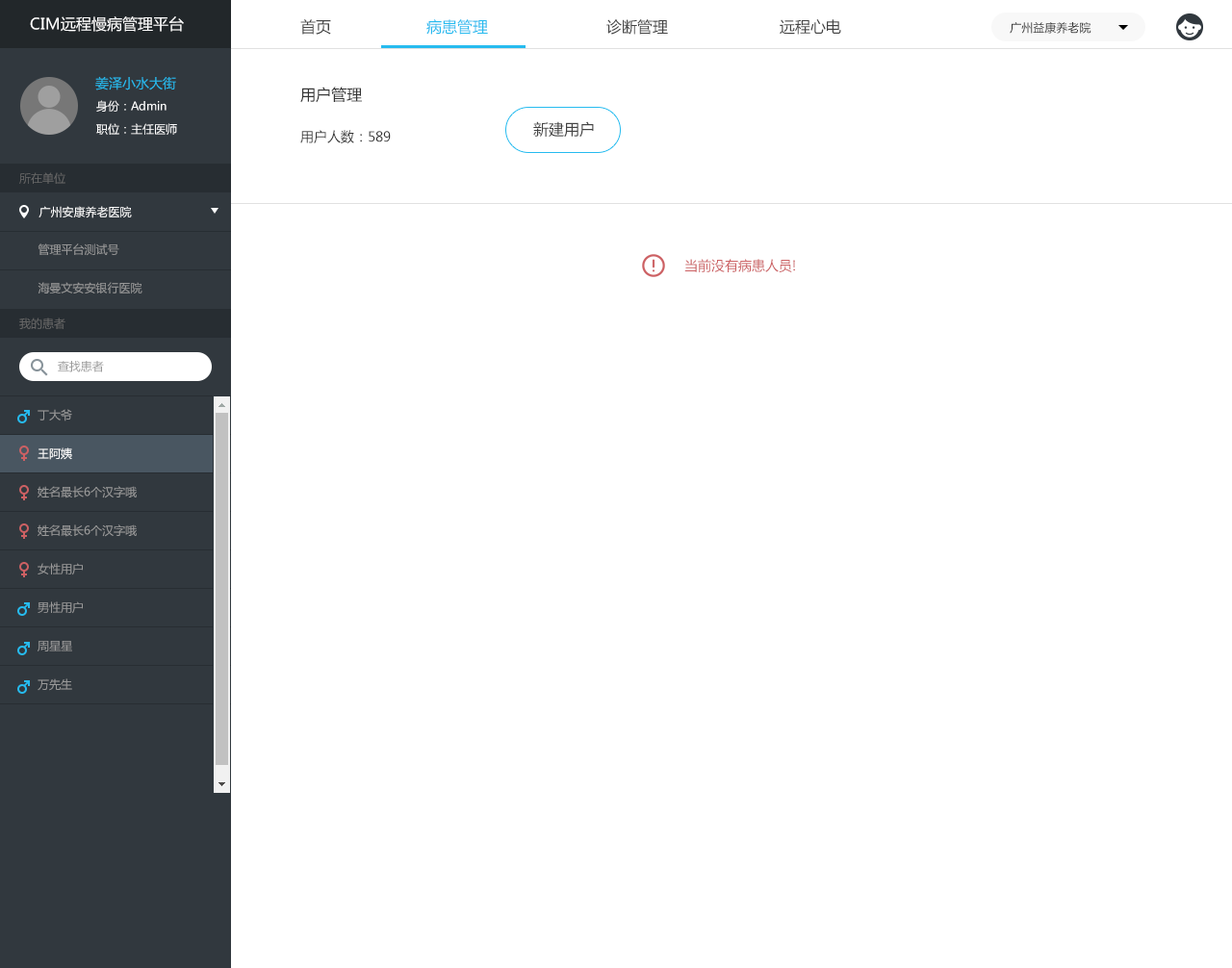
<style>
.page{position:relative;width:1232px;height:968px;background:#ffffff}
.page>*{position:absolute;margin:0}
.t1{font:15.4px "MicrosoftYaHei";color:#ffffff}
.t2{font:15.4px "MicrosoftYaHei";color:#434343}
.t3{font:15.4px "MicrosoftYaHei";color:#26bbef}
.t4{font:11.5px "MicrosoftYaHei";color:#333333}
.t5{font:13.5px "MicrosoftYaHei";color:#26bbef}
.t6{font:15.4px "MicrosoftYaHei";color:#333333}
.t7{font:11.5px "MicrosoftYaHei";color:#ffffff}
.t8{font:13.5px "MicrosoftYaHei";color:#333333}
.t9{font:11.5px "MicrosoftYaHei";color:#666666}
.t10{font:11.5px "MicrosoftYaHei";color:#999999}
.t11{font:13.5px "MicrosoftYaHei";color:#cc6063}
.t12{font:11.5px/19.2px "MicrosoftYaHei";color:#999999}
.t13{font:11.5px/19.2px "MicrosoftYaHei";color:#ffffff}
</style>
<div class="page">
<p class="t1" style="left:30px;top:16px;width:154px;height:16px">CIM远程慢病管理平台</p>
<p class="t2" style="left:300px;top:19px;width:31px;height:16px">首页</p>
<p class="t3" style="left:426px;top:19px;width:62px;height:16px">病患管理</p>
<p class="t2" style="left:606px;top:19px;width:235px;height:16px">诊断管理    远程心电</p>
<p class="t4" style="left:1009px;top:22px;width:82px;height:12px">广州益康养老院</p>
<p class="t5" style="left:95px;top:76px;width:81px;height:14px">姜泽小水大街</p>
<p class="t6" style="left:300px;top:87px;width:62px;height:16px">用户管理</p>
<p class="t7" style="left:96px;top:100px;width:70px;height:12px">身份：Admin</p>
<p class="t7" style="left:96px;top:123px;width:81px;height:12px">职位：主任医师</p>
<p class="t2" style="left:533px;top:121px;width:61px;height:17px">新建用户</p>
<p class="t8" style="left:300px;top:130px;width:91px;height:13px">用户人数：589</p>
<p class="t9" style="left:19px;top:172px;width:46px;height:12px">所在单位</p>
<p class="t7" style="left:38px;top:206px;width:94px;height:12px">广州安康养老医院</p>
<p class="t10" style="left:38px;top:243px;width:81px;height:13px">管理平台测试号</p>
<p class="t11" style="left:684px;top:259px;width:111px;height:13px">当前没有病患人员!</p>
<p class="t10" style="left:38px;top:282px;width:104px;height:12px">海曼文安安银行医院</p>
<p class="t9" style="left:19px;top:318px;width:46px;height:11px">我的患者</p>
<p class="t10" style="left:58px;top:361px;width:46px;height:11px">查找患者</p>
<p class="t12" style="left:38px;top:409px;width:99px;height:282px">丁大爷<br><br><span class="t13">王阿姨<br></span><br>姓名最长6个汉字哦<br><br>姓名最长6个汉字哦<br><br>女性用户<br><br>男性用户<br><br>周星星<br><br>万先生<br><br>男女图表请区分<br><br>男性用户<br><br>男性用户<br><br>女性用户<br><br>工程师</p>
</div>
